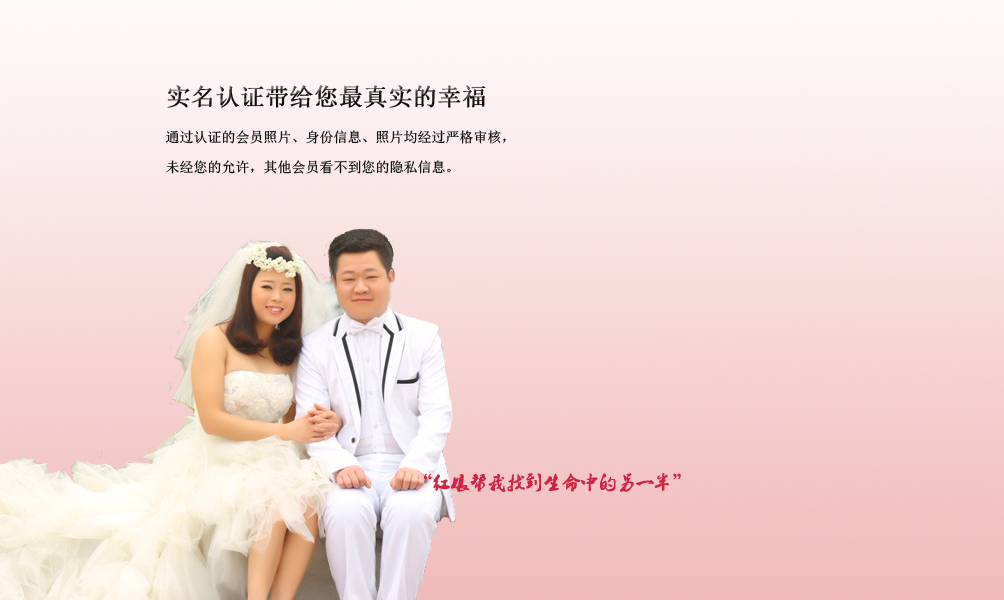
<style>
.page{position:relative;width:1004px;height:600px}
.page>*{position:absolute;margin:0}
.t1{font:24px "SimSun";color:#141112;font-weight:bold}
.t2{font:14px/30px "NSimSun";color:#070708}
.t3{font:18px "2.0-";color:#d02444;font-weight:bold}
</style>
<div class="page">
<p class="t1" style="left:167px;top:85px;width:319px;height:23px">实名认证带给您最真实的幸福</p>
<p class="t2" style="left:166px;top:130px;width:340px;height:44px">通过认证的会员照片、身份信息、照片均经过严格审核，<br>未经您的允许，其他会员看不到您的隐私信息。</p>
<p class="t3" style="left:424px;top:473px;width:257px;height:19px">“红娘帮我找到生命中的另一半”</p>
</div>
